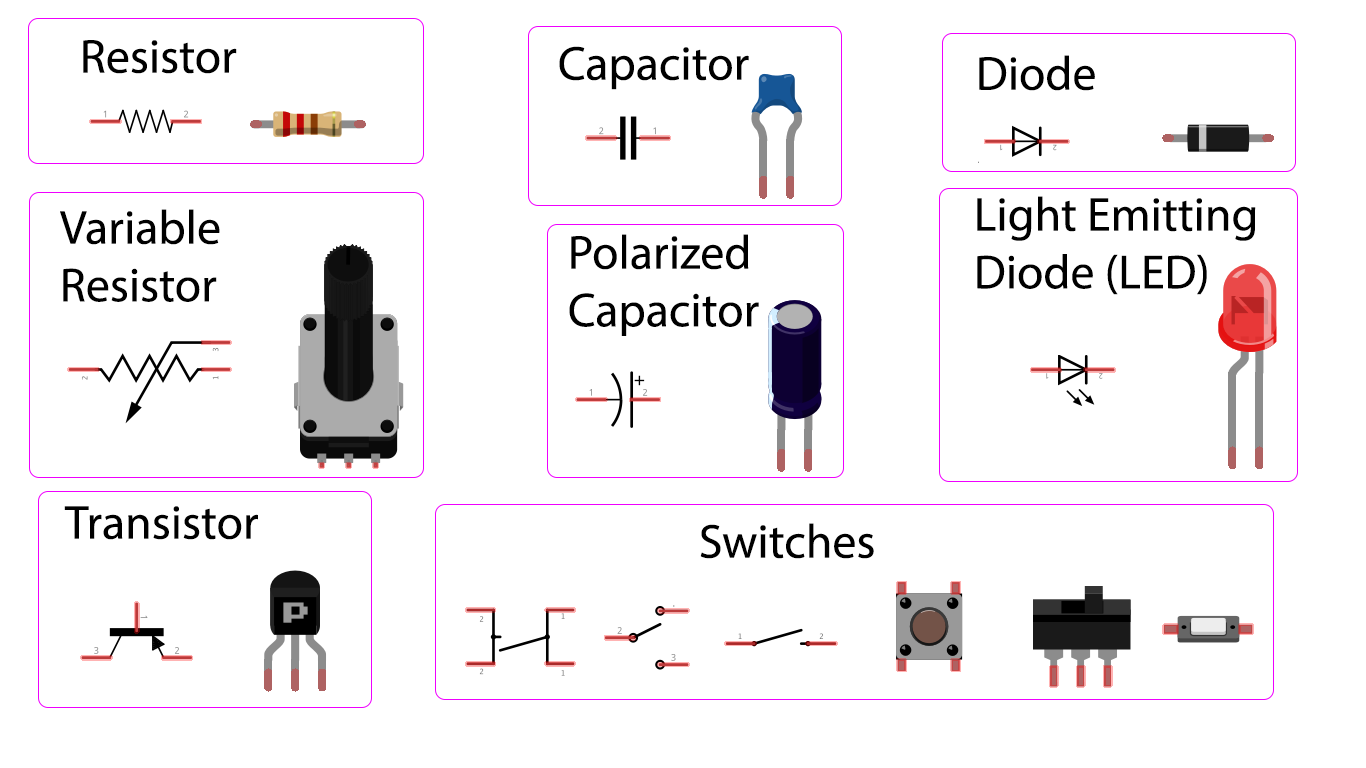
<style>
.page{position:relative;width:1366px;height:768px;background:#ffffff}
.page>*{position:absolute;margin:0}
.t1{font:48px "MyriadPro-Regular";color:#000000}
</style>
<div class="page">
<p class="t1" style="left:83px;top:40px;width:154px;height:34px">Resistor</p>
<p class="t1" style="left:559px;top:46px;width:190px;height:44px">Capacitor</p>
<p class="t1" style="left:979px;top:55px;width:116px;height:36px">Diode</p>
<p class="t1" style="left:977px;top:196px;width:279px;height:99px">Light Emitting<br>Diode (LED)</p>
<p class="t1" style="left:60px;top:209px;width:160px;height:93px">Variable<br>Resistor</p>
<p class="t1" style="left:569px;top:234px;width:190px;height:102px">Polarized<br>Capacitor</p>
<p class="t1" style="left:64px;top:506px;width:194px;height:34px">Transistor</p>
<p class="t1" style="left:700px;top:523px;width:174px;height:36px">Switches</p>
</div>
